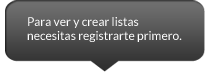
<style>
.page{position:relative;width:209px;height:72px}
.page>*{position:absolute;margin:0}
.t1{font:12px "Lato-Regular";color:#ffffff}
</style>
<div class="page">
<p class="t1" style="left:27px;top:17px;width:155px;height:25px">Para ver y crear listas <br>necesitas registrarte primero.</p>
</div>
